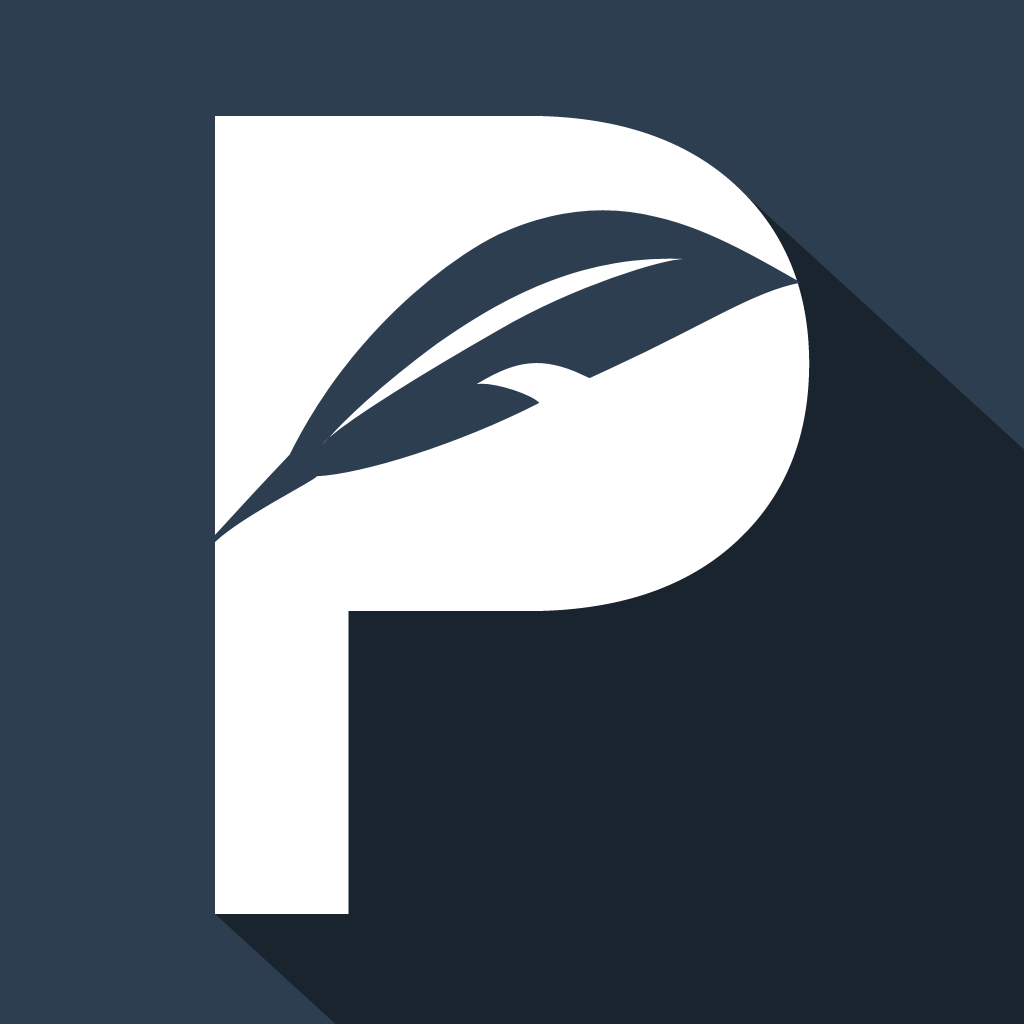
<style>
.page{position:relative;width:1024px;height:1024px;background:#2c3e50}
.page>*{position:absolute;margin:0}
.t1{font:1121.9px "Roboto-Medium";letter-spacing:0.25em;color:#ffffff}
</style>
<div class="page">
<p class="t1" style="left:215px;top:116px;width:595px;height:798px">P</p>
</div>
